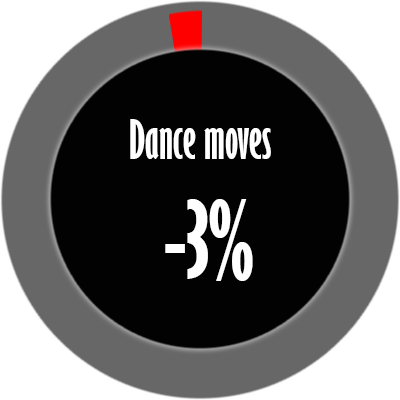
<style>
.page{position:relative;width:400px;height:400px;background:#020202}
.page>*{position:absolute;margin:0}
.t1{font:50px "GillSansMT-ExtraCondensedBold";color:#ffffff}
.t2{font:100px "GillSansMT-ExtraCondensedBold";color:#ffffff}
</style>
<div class="page">
<p class="t1" style="left:130px;top:119px;width:141px;height:40px">Dance moves</p>
<p class="t2" style="left:165px;top:199px;width:88px;height:82px">-3%</p>
</div>
